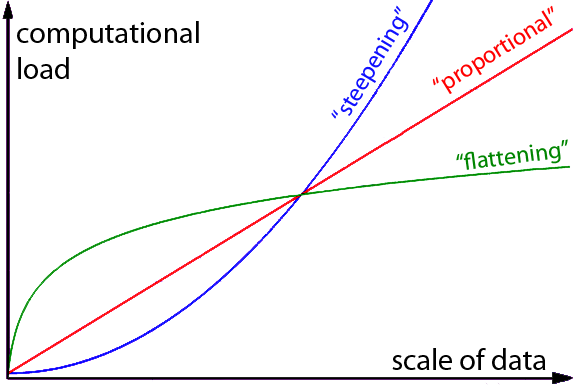
<style>
.page{position:relative;width:575px;height:385px;background:#ffffff}
.page>*{position:absolute;margin:0}
.t1{font:24px "MyriadPro-Regular";color:#1010ff}
.t2{font:24px "MyriadPro-Regular";color:#ff0000}
.t3{font:30px "MyriadPro-Regular";color:#000000}
.t4{font:24px "MyriadPro-Regular";color:#008500}
</style>
<div class="page">
<p class="t1" style="left:331px;top:5px;width:78px;height:114px;rotate:-59deg">“steepening”</p>
<p class="t2" style="left:432px;top:5px;width:122px;height:89px;rotate:-32deg">“proportional”</p>
<p class="t3" style="left:17px;top:21px;width:182px;height:58px">computational<br>load</p>
<p class="t4" style="left:456px;top:139px;width:112px;height:31px;rotate:-8deg">“flattening”</p>
<p class="t3" style="left:392px;top:348px;width:154px;height:22px">scale of data</p>
</div>
